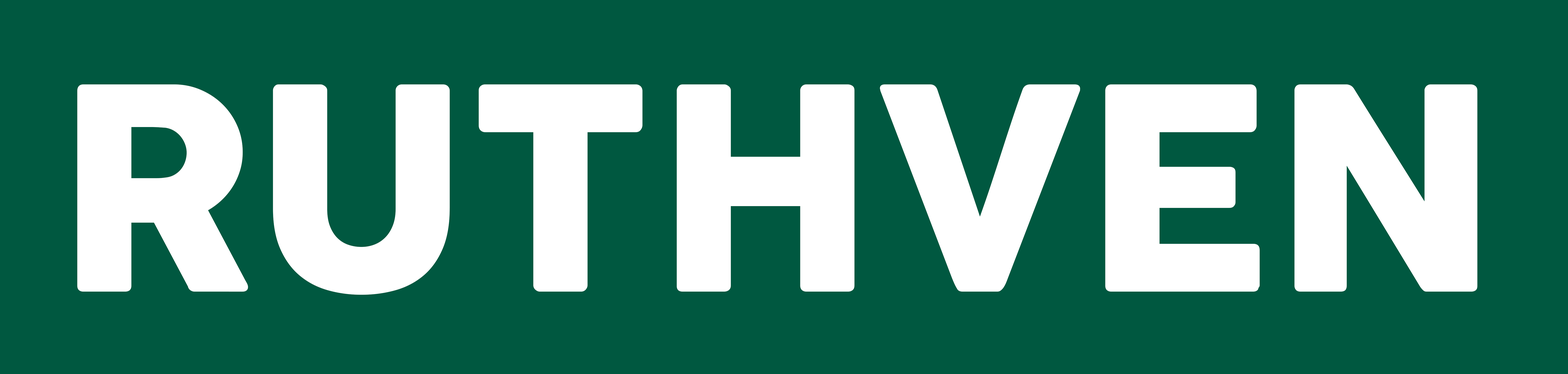
<style>
.page{position:relative;width:1568px;height:374px;background:#005840}
.page>*{position:absolute;margin:0}
.t1{font:279.4px "Cocogoose";color:#ffffff}
</style>
<div class="page">
<p class="t1" style="left:77px;top:84px;width:1400px;height:211px">RUTHVEN</p>
</div>
